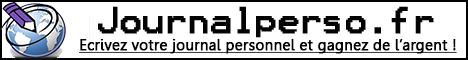
<style>
.page{position:relative;width:468px;height:60px;background:#ffffff}
.page>*{position:absolute;margin:0}
.t1{font:15px "Gisha";color:#030304;font-weight:bold;text-decoration:underline}
</style>
<div class="page">
<p class="t1" style="left:79px;top:39px;width:378px;height:15px">Ecrivez votre journal personnel et gagnez de l’argent !</p>
</div>
